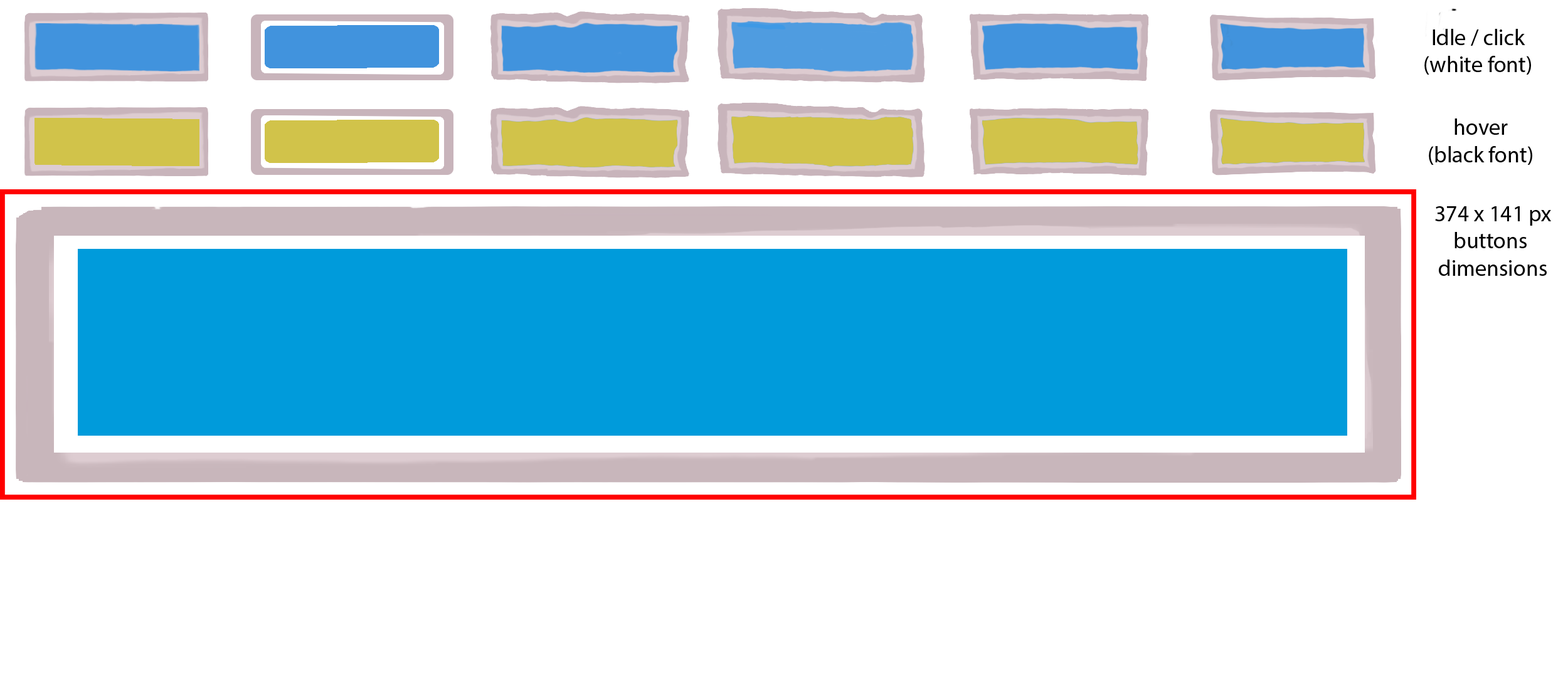
<style>
.page{position:relative;width:1568px;height:677px;background:#ffffff}
.page>*{position:absolute;margin:0}
.t1{font:22.6px "MyriadPro-Regular";color:#000000}
</style>
<div class="page">
<p class="t1" style="left:1424px;top:29px;width:107px;height:46px;text-align:center">Idle / click<br>(white font)</p>
<p class="t1" style="left:1429px;top:119px;width:103px;height:46px;text-align:center">hover<br>(black font)</p>
<p class="t1" style="left:1435px;top:206px;width:116px;height:70px;text-align:center">374 x 141 px<br>buttons <br>dimensions</p>
</div>
